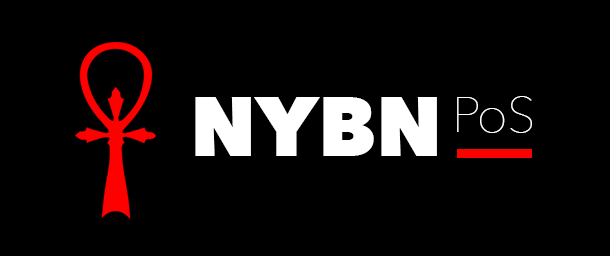
<style>
.page{position:relative;width:610px;height:256px;background:#000000}
.page>*{position:absolute;margin:0}
.t1{font:83.7px "AvenirNext-Heavy";color:#ffffff}
.t2{font:49.6px "AvenirNext-UltraLight";color:#ffffff}
</style>
<div class="page">
<p class="t1" style="left:195px;top:97px;width:242px;height:59px">NYBN</p>
<p class="t2" style="left:457px;top:96px;width:75px;height:37px">PoS</p>
</div>
